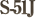
<style>
.page{position:relative;width:45px;height:18px;background:#ffffff}
.page>*{position:absolute;margin:0}
.t1{font:18px "RyuminPro-ExBold";letter-spacing:-0.08em;color:#4a3f32;font-weight:bold;scale:0.9 1}
</style>
<div class="page">
<p class="t1" style="left:0px;top:0px;width:36px;height:18px">S-51J</p>
</div>
